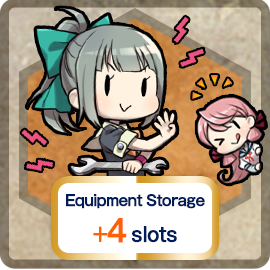
<style>
.page{position:relative;width:270px;height:270px}
.page>*{position:absolute;margin:0}
.t1{font:15px "GothicMB101Pro-Medium";letter-spacing:-0.04em;color:#001d59;font-weight:bold;scale:0.9 1}
.t2{font:20px "GothicMB101Pro-Medium";letter-spacing:-0.04em;color:#ff6000;font-weight:bold;scale:0.9 1}
.t3{font:30px "GothicMB101Pro-Medium";letter-spacing:-0.04em;color:#ff6000;font-weight:bold;scale:0.9 1}
.t4{font:20px "GothicMB101Pro-Medium";letter-spacing:-0.04em;color:#001d59;font-weight:bold;scale:0.9 1}
</style>
<div class="page">
<p class="t1" style="left:66px;top:194px;width:139px;height:49px;text-align:center">Equipment Storage<br><span class="t2">+</span><span class="t3">4 </span><span class="t4">slots</span></p>
</div>
